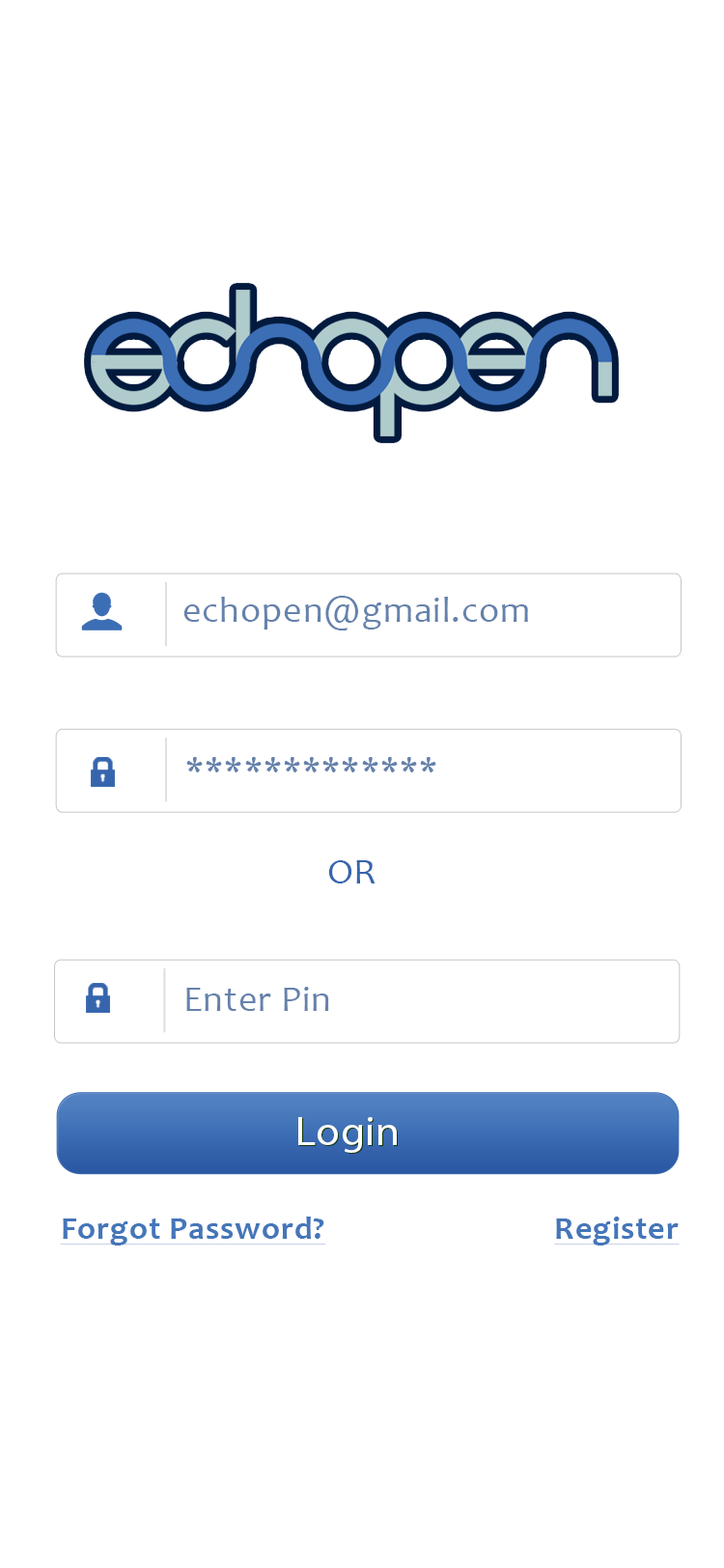
<style>
.page{position:relative;width:724px;height:1568px;background:#ffffff}
.page>*{position:absolute;margin:0}
.t1{font:35.9px "Candara";letter-spacing:0.02em;color:#6582ac;scale:1.03 1}
.t2{font:36px "Candara";letter-spacing:0.02em;color:#3665ae;scale:1.03 1}
.t3{font:41px "MyriadPro-Regular";color:#ffffff;scale:1.07 1}
.t4{font:32.2px "Candara-Bold";letter-spacing:0.02em;color:#4476b9;text-decoration:underline;scale:1.03 1}
</style>
<div class="page">
<p class="t1" style="left:183px;top:596px;width:345px;height:34px">echopen@gmail.com</p>
<p class="t1" style="left:186px;top:757px;width:250px;height:15px">*************</p>
<p class="t2" style="left:328px;top:860px;width:48px;height:23px">OR</p>
<p class="t1" style="left:186px;top:987px;width:143px;height:24px">Enter Pin</p>
<p class="t3" style="left:298px;top:1117px;width:99px;height:36px">Login</p>
<p class="t4" style="left:60px;top:1217px;width:266px;height:29px">Forgot Password?</p>
<p class="t4" style="left:554px;top:1217px;width:126px;height:29px">Register</p>
</div>
